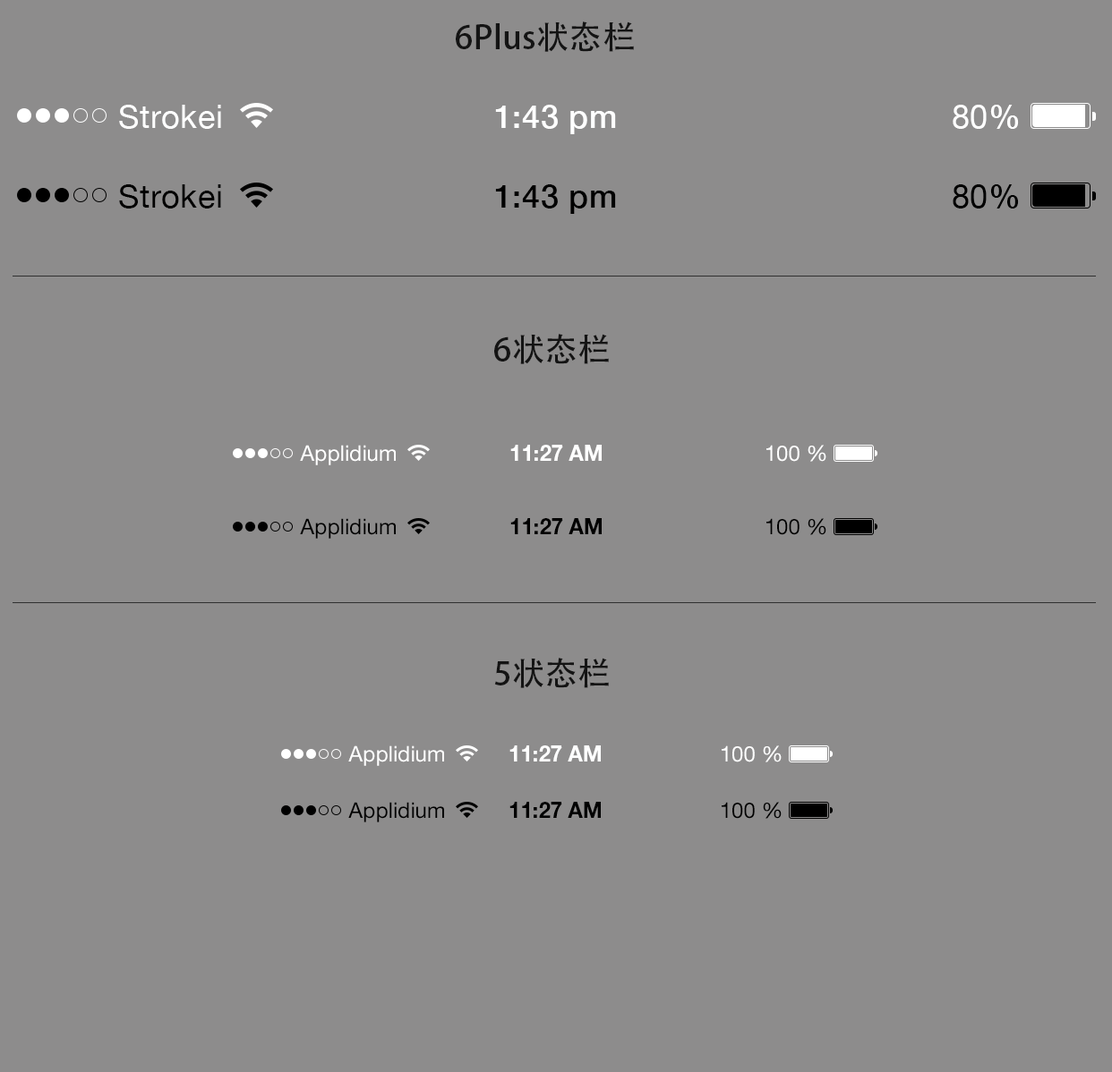
<style>
.page{position:relative;width:1112px;height:1072px;background:#8d8c8c}
.page>*{position:absolute;margin:0}
.t1{font:32.2px "AdobeHeitiStd-Regular";letter-spacing:0.02em;color:#141414}
.t2{font:32.2px "HelveticaNeue";letter-spacing:0.02em;color:#ffffff}
.t3{font:32.2px "HelveticaNeue-Medium";letter-spacing:0.02em;color:#ffffff}
.t4{font:32.2px "HelveticaNeue";letter-spacing:0.02em;color:#000000}
.t5{font:32.2px "HelveticaNeue-Medium";letter-spacing:0.02em;color:#000000}
.t6{font:21.5px "HelveticaNeueLTStd-Roman";color:#ffffff}
.t7{font:21.5px "HelveticaNeueLTStd-Bd";color:#ffffff}
.t8{font:21.5px "HelveticaNeueLTStd-Roman";color:#000000}
.t9{font:21.5px "HelveticaNeueLTStd-Bd";color:#000000}
</style>
<div class="page">
<p class="t1" style="left:456px;top:21px;width:178px;height:31px">6Plus状态栏</p>
<p class="t2" style="left:119px;top:105px;width:102px;height:24px">Strokei</p>
<p class="t3" style="left:495px;top:105px;width:121px;height:29px">1:43 pm</p>
<p class="t2" style="left:953px;top:105px;width:66px;height:24px">80<span class="t3">%</span></p>
<p class="t4" style="left:119px;top:184px;width:102px;height:25px">Strokei</p>
<p class="t5" style="left:495px;top:184px;width:121px;height:30px">1:43 pm</p>
<p class="t4" style="left:953px;top:184px;width:66px;height:25px">80<span class="t5">%</span></p>
<p class="t1" style="left:494px;top:334px;width:115px;height:30px">6状态栏</p>
<p class="t6" style="left:300px;top:445px;width:96px;height:21px">Applidium</p>
<p class="t7" style="left:510px;top:445px;width:92px;height:16px">11:27 AM</p>
<p class="t6" style="left:766px;top:445px;width:60px;height:17px">100 %</p>
<p class="t8" style="left:300px;top:518px;width:96px;height:21px">Applidium</p>
<p class="t9" style="left:510px;top:518px;width:92px;height:16px">11:27 AM</p>
<p class="t8" style="left:766px;top:518px;width:60px;height:17px">100 %</p>
<p class="t1" style="left:494px;top:658px;width:115px;height:30px">5状态栏</p>
<p class="t6" style="left:348px;top:746px;width:96px;height:20px">Applidium</p>
<p class="t7" style="left:509px;top:746px;width:92px;height:16px">11:27 AM</p>
<p class="t6" style="left:722px;top:746px;width:60px;height:17px">100 %</p>
<p class="t8" style="left:348px;top:802px;width:96px;height:21px">Applidium</p>
<p class="t9" style="left:509px;top:802px;width:92px;height:16px">11:27 AM</p>
<p class="t8" style="left:722px;top:802px;width:60px;height:17px">100 %</p>
</div>
